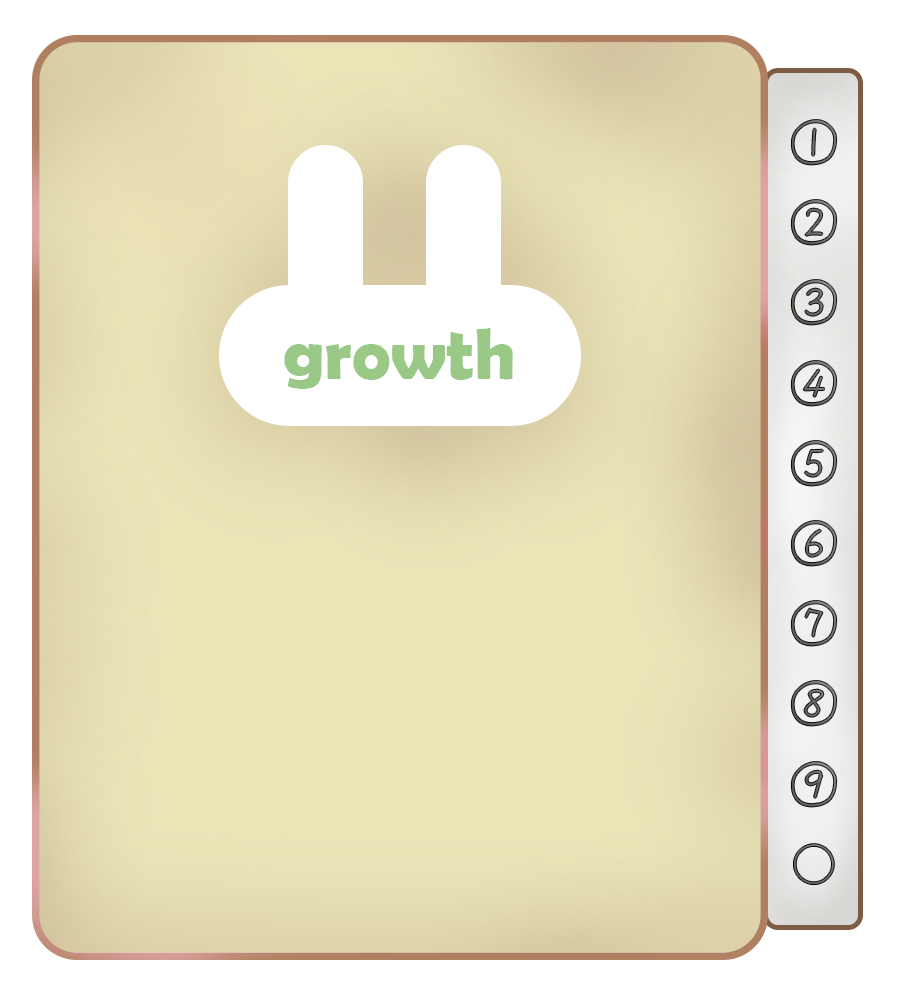
<style>
.page{position:relative;width:900px;height:985px;background:#ffffff}
.page>*{position:absolute;margin:0}
.t1{font:45.8px "DFHsiu-W3-WIN-BF";color:#6c6c6c}
.t2{font:45.8px "DFKaiShu-SB-Estd-BF";color:#6c6c6c}
.t3{font:73.1px "BerlinSansFBDemi-Bold";color:#9ac886}
</style>
<div class="page">
<p class="t1" style="left:791px;top:120px;width:46px;height:764px">①<br>②<br>③<br>④<br>⑤<br>⑥<br>⑦<br>⑧<br>⑨<br><span class="t2">○</span></p>
<p class="t3" style="left:284px;top:328px;width:229px;height:61px">growth</p>
</div>
